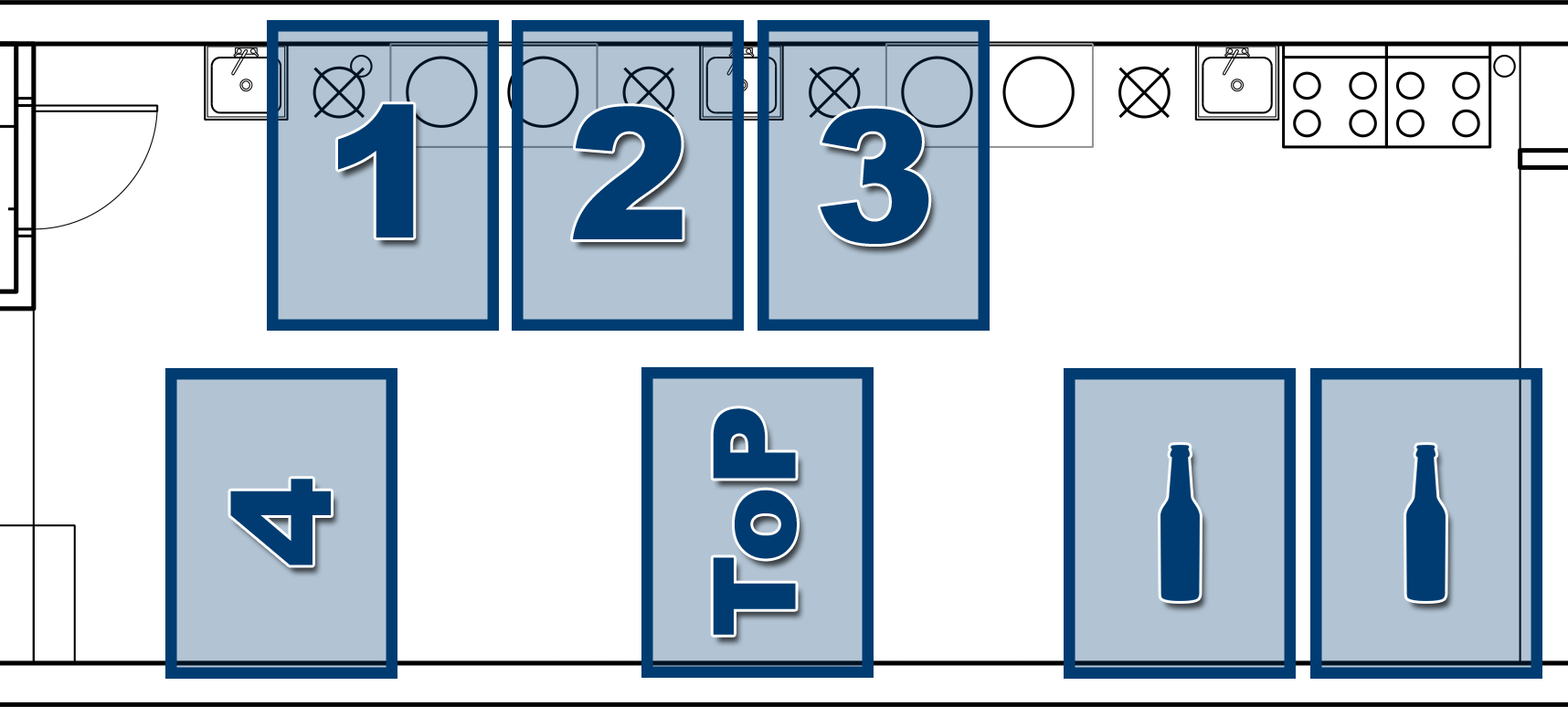
<style>
.page{position:relative;width:1568px;height:707px;background:#ffffff}
.page>*{position:absolute;margin:0}
.t1{font:182.8px "Arial-Black";color:#003c71}
.t2{font:114.2px "Arial-Black";color:#003c71}
.t3{font:137.1px "Arial-Black";color:#003c71}
</style>
<div class="page">
<p class="t1" style="left:338px;top:104px;width:76px;height:134px">1</p>
<p class="t1" style="left:573px;top:106px;width:110px;height:133px">2</p>
<p class="t1" style="left:820px;top:108px;width:109px;height:136px">3</p>
<p class="t2" style="left:713px;top:408px;width:84px;height:227px;rotate:-90deg">ToP</p>
<p class="t3" style="left:230px;top:479px;width:101px;height:87px;rotate:-90deg">4</p>
</div>
